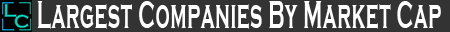
<style>
.page{position:relative;width:450px;height:32px;background:#333333}
.page>*{position:absolute;margin:0}
.t1{font:40.9px "CopperplateGothic-Bold";letter-spacing:0.02em;color:#ffffff;scale:0.49 1}
</style>
<div class="page">
<p class="t1" style="left:37px;top:1px;width:404px;height:28px">Largest Companies By Market Cap</p>
</div>
